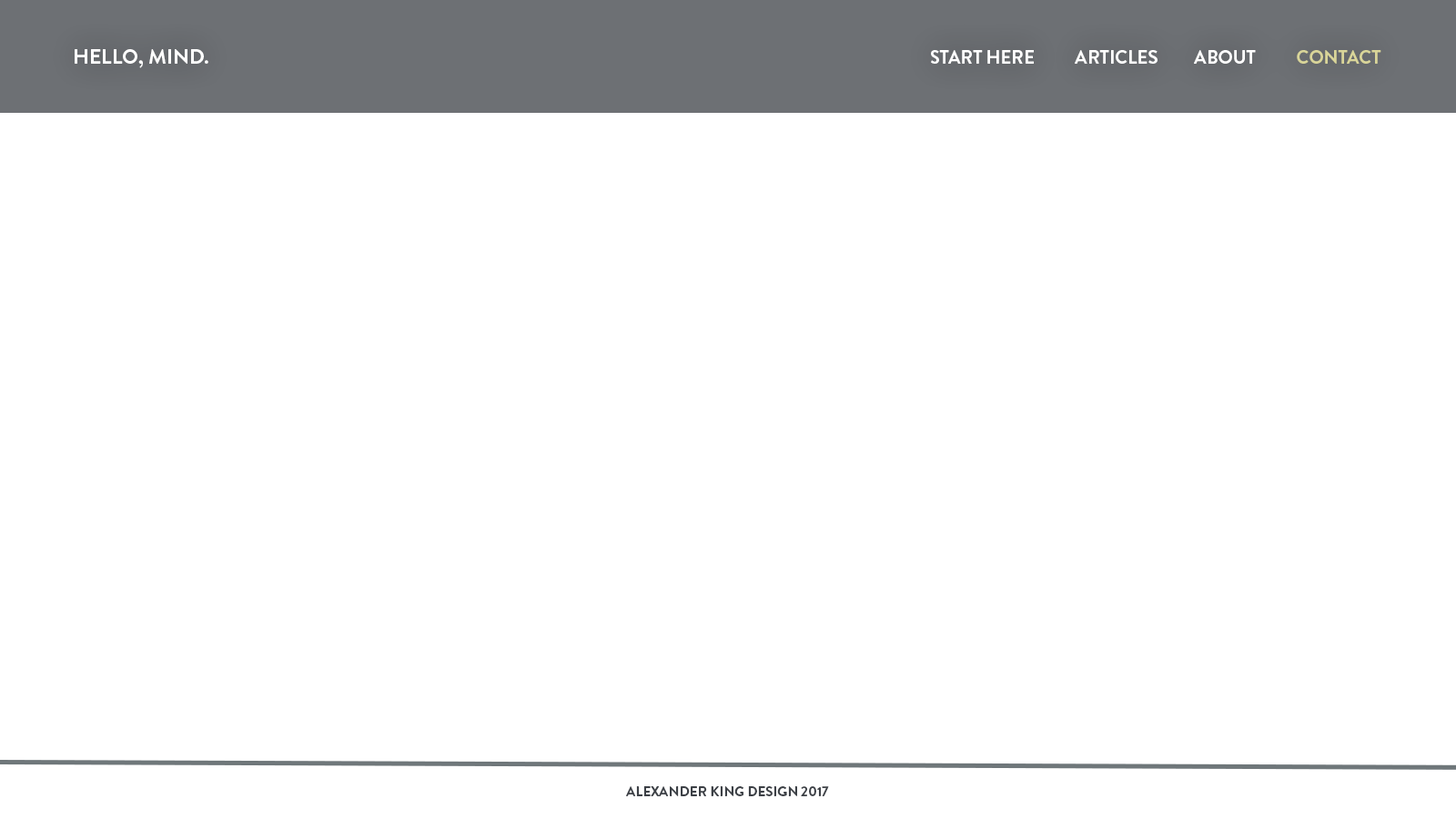
<style>
.page{position:relative;width:1456px;height:819px;background:#ffffff}
.page>*{position:absolute;margin:0}
.t1{font:20.8px "BrandonGrotesque-Bold";color:#ffffff;text-transform:uppercase}
.t2{font:18.5px "BrandonGrotesque-Bold";color:#ffffff;text-transform:uppercase}
.t3{font:18.5px "BrandonGrotesque-Bold";color:#d9d599;text-transform:uppercase}
</style>
<div class="page">
<p class="t1" style="left:75px;top:49px;width:133px;height:19px">Hello, Mind.</p>
<p class="t2" style="left:931px;top:50px;width:103px;height:14px">Start herE</p>
<p class="t2" style="left:1075px;top:50px;width:306px;height:14px">Articles         about          <span class="t3">contact</span></p>
</div>
